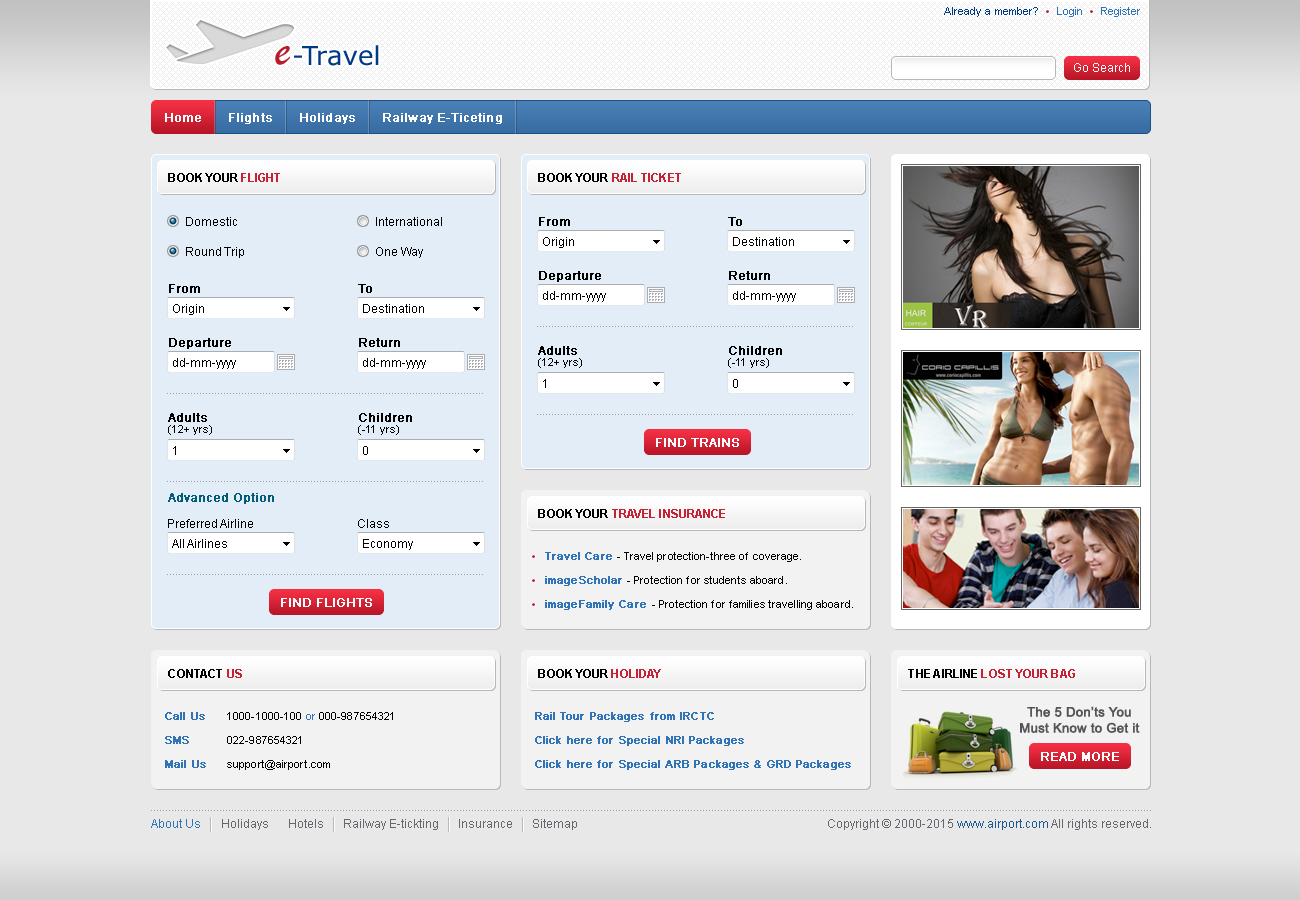
<style>
.page{position:relative;width:1300px;height:900px;background:#e8e8e8}
.page>*{position:absolute;margin:0}
.t1{font:11px "ArialMT";letter-spacing:0.01em;color:#003986}
.t2{font:11px "ArialMT";letter-spacing:0.01em;color:#3074b5}
.t3{font:12px "ArialMT";color:#fffdfa}
.t4{font:12px "ArialMT";letter-spacing:0.01em;color:#ffffff;font-weight:bold}
.t5{font:12px "Arial-BoldMT";letter-spacing:0.01em;color:#000000;text-transform:uppercase}
.t6{font:12px "Arial-BoldMT";letter-spacing:0.01em;color:#c52235;text-transform:uppercase}
.t7{font:12px "ArialMT";color:#000000}
.t8{font:12px "ArialMT";color:#000000;font-weight:bold}
.t9{font:11px "ArialMT";color:#000000}
.t10{font:12px "ArialMT";color:#ffffff;font-weight:bold}
.t11{font:12px "ArialMT";color:#035d77;font-weight:bold}
.t12{font:11px "ArialMT";letter-spacing:0.01em;color:#3073b7;font-weight:bold}
.t13{font:11px "ArialMT";letter-spacing:0.01em;color:#000000}
.t14{font:11px "ArialMT";letter-spacing:0.01em;color:#3073b7}
.t15{font:13px/16px "ArialMT";color:#555555;font-weight:bold}
.t16{font:12px "ArialMT";color:#3073b7}
.t17{font:12px "ArialMT";color:#66666d}
.t18{font:12px "ArialMT";color:#1f5891}
</style>
<div class="page">
<p class="t1" style="left:944px;top:7px;width:94px;height:10px">Already a member?</p>
<p class="t2" style="left:1057px;top:7px;width:25px;height:10px">Login</p>
<p class="t2" style="left:1101px;top:7px;width:39px;height:10px">Register</p>
<p class="t3" style="left:1074px;top:63px;width:56px;height:9px">Go Search</p>
<p class="t4" style="left:165px;top:113px;width:36px;height:9px">Home</p>
<p class="t4" style="left:229px;top:113px;width:43px;height:11px">Flights</p>
<p class="t4" style="left:300px;top:113px;width:55px;height:11px">Holidays</p>
<p class="t4" style="left:383px;top:113px;width:119px;height:11px">Railway E-Ticeting</p>
<p class="t5" style="left:168px;top:173px;width:112px;height:9px">book YOUR<span class="t6"> flight</span></p>
<p class="t6" style="left:538px;top:173px;width:143px;height:9px"><span class="t5">book Your </span>RAIL TICKET</p>
<p class="t7" style="left:186px;top:217px;width:51px;height:9px">Domestic</p>
<p class="t7" style="left:376px;top:217px;width:66px;height:9px">International</p>
<p class="t8" style="left:539px;top:217px;width:31px;height:9px">From</p>
<p class="t8" style="left:728px;top:217px;width:14px;height:9px">To</p>
<p class="t7" style="left:543px;top:237px;width:31px;height:11px">Origin</p>
<p class="t7" style="left:733px;top:237px;width:61px;height:9px">Destination</p>
<p class="t7" style="left:186px;top:247px;width:58px;height:11px">Round Trip</p>
<p class="t7" style="left:376px;top:247px;width:47px;height:11px">One Way</p>
<p class="t8" style="left:539px;top:271px;width:62px;height:11px">Departure</p>
<p class="t8" style="left:729px;top:271px;width:41px;height:9px">Return</p>
<p class="t8" style="left:169px;top:284px;width:31px;height:9px">From</p>
<p class="t8" style="left:358px;top:284px;width:14px;height:9px">To</p>
<p class="t7" style="left:543px;top:291px;width:63px;height:11px">dd-mm-yyyy</p>
<p class="t7" style="left:733px;top:291px;width:63px;height:11px">dd-mm-yyyy</p>
<p class="t7" style="left:173px;top:304px;width:31px;height:11px">Origin</p>
<p class="t7" style="left:363px;top:304px;width:61px;height:9px">Destination</p>
<p class="t8" style="left:169px;top:338px;width:62px;height:11px">Departure</p>
<p class="t8" style="left:359px;top:338px;width:41px;height:9px">Return</p>
<p class="t8" style="left:538px;top:346px;width:39px;height:9px">Adults</p>
<p class="t8" style="left:729px;top:346px;width:53px;height:9px">Children</p>
<p class="t7" style="left:173px;top:358px;width:63px;height:11px">dd-mm-yyyy</p>
<p class="t7" style="left:363px;top:358px;width:63px;height:11px">dd-mm-yyyy</p>
<p class="t9" style="left:538px;top:358px;width:44px;height:10px">(12+ yrs)</p>
<p class="t9" style="left:728px;top:358px;width:41px;height:10px">(-11 yrs)</p>
<p class="t7" style="left:543px;top:379px;width:3px;height:9px">1</p>
<p class="t7" style="left:733px;top:379px;width:5px;height:9px">0</p>
<p class="t8" style="left:168px;top:413px;width:39px;height:9px">Adults</p>
<p class="t8" style="left:359px;top:413px;width:53px;height:9px">Children</p>
<p class="t9" style="left:168px;top:425px;width:44px;height:10px">(12+ yrs)</p>
<p class="t9" style="left:358px;top:425px;width:41px;height:10px">(-11 yrs)</p>
<p class="t10" style="left:656px;top:438px;width:83px;height:9px">FIND TRAINS</p>
<p class="t7" style="left:173px;top:446px;width:3px;height:9px">1</p>
<p class="t7" style="left:363px;top:446px;width:5px;height:9px">0</p>
<p class="t11" style="left:168px;top:493px;width:106px;height:11px">Advanced Option</p>
<p class="t6" style="left:538px;top:509px;width:187px;height:9px"><span class="t5">book Your </span>TRAVEL INSURANCE</p>
<p class="t7" style="left:168px;top:519px;width:85px;height:9px">Preferred Airline</p>
<p class="t7" style="left:358px;top:519px;width:31px;height:9px">Class</p>
<p class="t7" style="left:172px;top:539px;width:55px;height:9px">All Airlines</p>
<p class="t7" style="left:363px;top:539px;width:50px;height:11px">Economy</p>
<p class="t12" style="left:545px;top:552px;width:67px;height:8px">Travel Care</p>
<p class="t13" style="left:617px;top:552px;width:184px;height:10px">- Travel protection-three of coverage.</p>
<p class="t12" style="left:545px;top:576px;width:77px;height:10px">imageScholar</p>
<p class="t13" style="left:627px;top:576px;width:160px;height:8px">- Protection for students aboard.</p>
<p class="t10" style="left:281px;top:598px;width:91px;height:9px">FIND FLIGHTS</p>
<p class="t12" style="left:545px;top:600px;width:101px;height:10px">imageFamily Care</p>
<p class="t13" style="left:652px;top:600px;width:201px;height:10px">- Protection for families travelling aboard.</p>
<p class="t5" style="left:168px;top:669px;width:74px;height:9px">CONTACT <span class="t6">US</span></p>
<p class="t5" style="left:538px;top:669px;width:123px;height:9px">BOOK YOUR <span class="t6">HOLIDAY</span></p>
<p class="t6" style="left:908px;top:669px;width:167px;height:9px"><span class="t5">The Airline </span>Lost Your Bag</p>
<p class="t12" style="left:165px;top:712px;width:40px;height:8px">Call Us</p>
<p class="t13" style="left:227px;top:712px;width:166px;height:8px">1000-1000-100 <span class="t14">or</span> 000-987654321</p>
<p class="t12" style="left:535px;top:712px;width:179px;height:10px">Rail Tour Packages from IRCTC</p>
<p class="t15" style="left:1020px;top:706px;width:120px;height:27px;text-align:center">The 5 Don’ts You Must Know to Get it Back</p>
<p class="t12" style="left:165px;top:736px;width:24px;height:8px">SMS</p>
<p class="t13" style="left:227px;top:736px;width:74px;height:8px">022-987654321</p>
<p class="t12" style="left:535px;top:736px;width:209px;height:10px">Click here for Special NRI Packages</p>
<p class="t12" style="left:165px;top:760px;width:41px;height:8px">Mail Us</p>
<p class="t13" style="left:227px;top:760px;width:103px;height:10px">support@airport.com</p>
<p class="t12" style="left:535px;top:760px;width:316px;height:10px">Click here for Special ARB Packages &amp; GRD Packages</p>
<p class="t10" style="left:1041px;top:752px;width:78px;height:9px">READ MORE</p>
<p class="t16" style="left:151px;top:819px;width:49px;height:9px">About Us</p>
<p class="t17" style="left:222px;top:819px;width:46px;height:11px">Holidays</p>
<p class="t17" style="left:289px;top:819px;width:34px;height:9px">Hotels</p>
<p class="t17" style="left:344px;top:819px;width:94px;height:11px">Railway E-tickting</p>
<p class="t17" style="left:459px;top:819px;width:53px;height:9px">Insurance</p>
<p class="t17" style="left:533px;top:819px;width:44px;height:11px">Sitemap</p>
<p class="t17" style="left:828px;top:819px;width:323px;height:11px">Copyright © 2000-2015 <span class="t18">www.airport.com</span> All rights reserved.</p>
</div>
